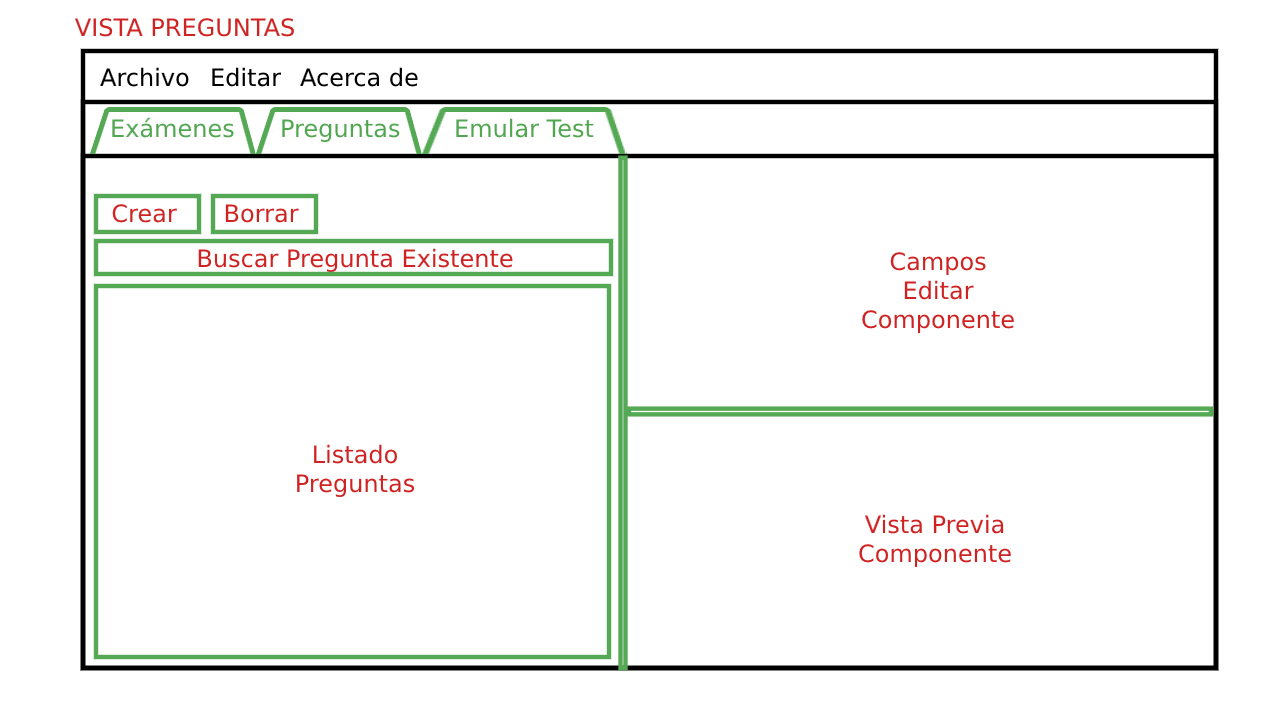
<style>
.page{position:relative;width:1280px;height:720px;background:#ffffff}
.page>*{position:absolute;margin:0}
.t1{font:24px "DejaVuSans";color:#cf2323}
.t2{font:24px "DejaVuSans";color:#000000}
.t3{font:24px "DejaVuSans";color:#51a651}
</style>
<div class="page">
<p class="t1" style="left:74px;top:18px;width:220px;height:19px">VISTA PREGUNTAS</p>
<p class="t2" style="left:100px;top:67px;width:89px;height:20px">Archivo</p>
<p class="t2" style="left:212px;top:67px;width:70px;height:20px">Editar</p>
<p class="t2" style="left:300px;top:67px;width:118px;height:20px">Acerca de</p>
<p class="t3" style="left:112px;top:117px;width:122px;height:21px">Exámenes</p>
<p class="t3" style="left:282px;top:119px;width:118px;height:23px">Preguntas</p>
<p class="t3" style="left:456px;top:118px;width:138px;height:20px">Emular Test</p>
<p class="t1" style="left:112px;top:204px;width:65px;height:19px">Crear</p>
<p class="t1" style="left:225px;top:204px;width:74px;height:19px">Borrar</p>
<p class="t1" style="left:198px;top:248px;width:315px;height:24px">Buscar Pregunta Existente</p>
<p class="t1" style="left:862px;top:252px;width:152px;height:81px;text-align:center">Campos<br>Editar<br>Componente</p>
<p class="t1" style="left:297px;top:444px;width:118px;height:53px;text-align:center">Listado<br>Preguntas</p>
<p class="t1" style="left:859px;top:514px;width:152px;height:53px;text-align:center">Vista Previa<br>Componente</p>
</div>
